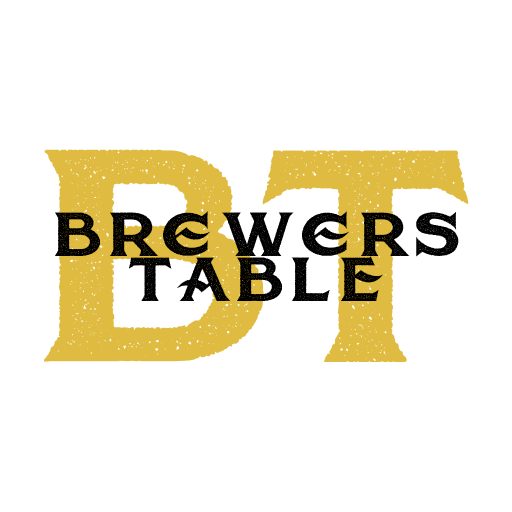
<style>
.page{position:relative;width:512px;height:512px;background:#ffffff}
.page>*{position:absolute;margin:0}
.t1{font:350px "AmericanBreweryRoughDemo";letter-spacing:-0.01em;color:#dfbc41}
.t2{font:72px "AmericanBreweryRoughDemo";letter-spacing:0.075em;color:#000000}
</style>
<div class="page">
<p class="t1" style="left:43px;top:149px;width:426px;height:213px">BT</p>
<p class="t2" style="left:55px;top:211px;width:404px;height:46px">Brewers</p>
<p class="t2" style="left:129px;top:256px;width:254px;height:45px">TABLE</p>
</div>
